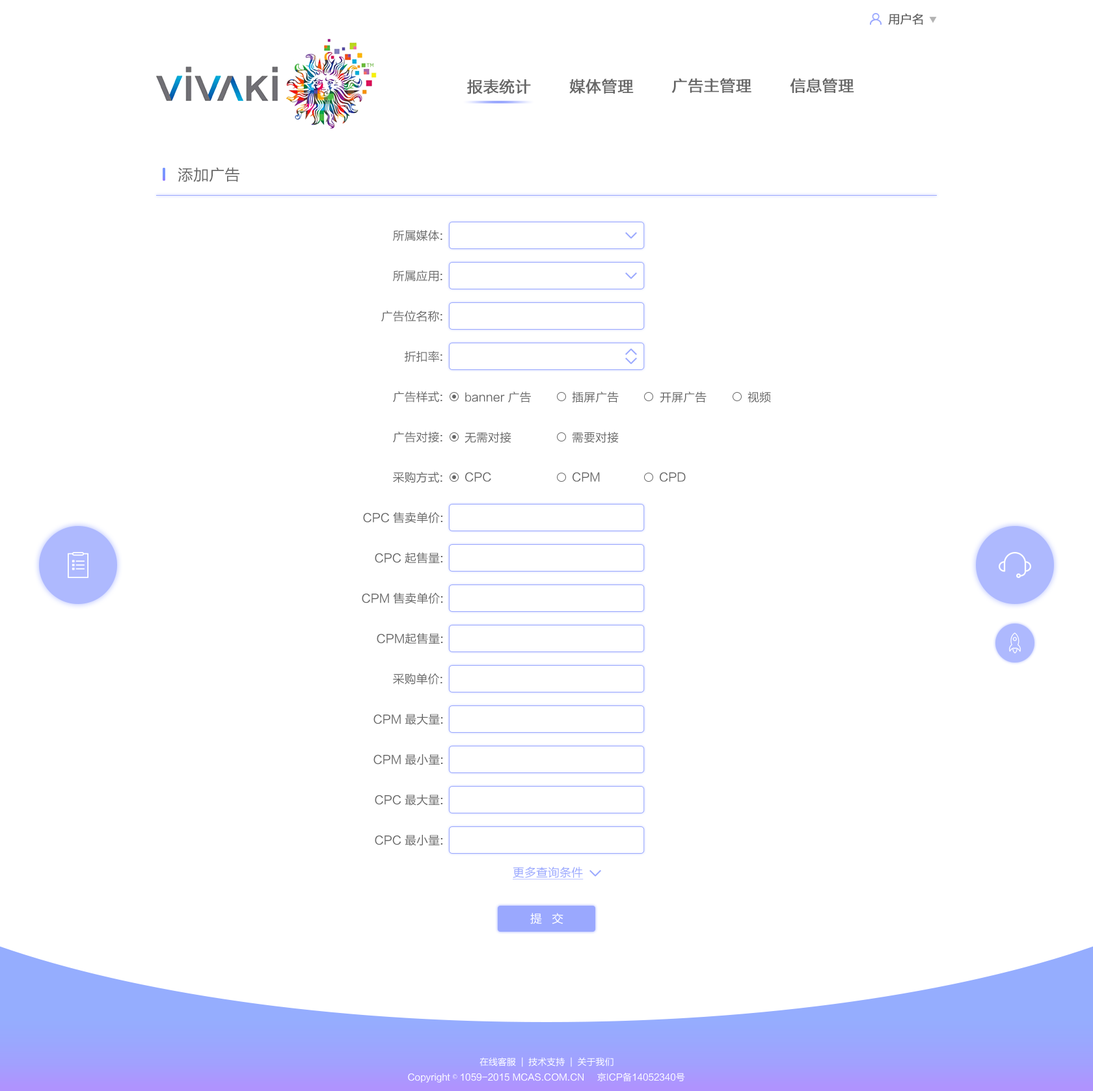
<style>
.page{position:relative;width:1093px;height:1091px;background:#ffffff}
.page>*{position:absolute;margin:0}
.t1{font:11.7px "FZLTHJW--GB1-0";color:#666666;font-weight:bold}
.t2{font:15.6px "FZLTHJW--GB1-0";color:#666666;font-weight:bold}
.t3{font:15.6px "FZLTHJW--GB1-0";color:#666666}
.t4{font:11.7px "FZLTHJW--GB1-0";color:#666666}
.t5{font:11.7px "FZLTHJW--GB1-0";color:#9aa8fe;text-decoration:underline}
.t6{font:11.7px "FZLTHJW--GB1-0";color:#ffffff}
.t7{font:9.1px "FZLTHJW--GB1-0";color:#ffffff}
.t8{font:9.1px "SimSun";color:#ffffff}
</style>
<div class="page">
<p class="t1" style="left:888px;top:13px;width:35px;height:12px">用户名</p>
<p class="t2" style="left:467px;top:79px;width:64px;height:15px">报表统计</p>
<p class="t2" style="left:569px;top:79px;width:64px;height:15px">媒体管理</p>
<p class="t2" style="left:671px;top:78px;width:80px;height:15px">广告主管理</p>
<p class="t2" style="left:790px;top:78px;width:64px;height:15px">信息管理</p>
<p class="t3" style="left:178px;top:167px;width:61px;height:15px">添加广告</p>
<p class="t4" style="left:393px;top:230px;width:49px;height:11px">所属媒体:</p>
<p class="t4" style="left:393px;top:270px;width:49px;height:12px">所属应用:</p>
<p class="t4" style="left:381px;top:310px;width:61px;height:12px">广告位名称:</p>
<p class="t4" style="left:405px;top:351px;width:37px;height:11px">折扣率:</p>
<p class="t4" style="left:393px;top:391px;width:49px;height:12px">广告样式:</p>
<p class="t4" style="left:465px;top:392px;width:66px;height:11px">banner 广告</p>
<p class="t4" style="left:572px;top:392px;width:47px;height:11px">插屏广告</p>
<p class="t4" style="left:659px;top:392px;width:47px;height:11px">开屏广告</p>
<p class="t4" style="left:747px;top:392px;width:24px;height:11px">视频</p>
<p class="t4" style="left:393px;top:431px;width:49px;height:12px">广告对接:</p>
<p class="t4" style="left:464px;top:432px;width:47px;height:11px">无需对接</p>
<p class="t4" style="left:572px;top:432px;width:47px;height:12px">需要对接</p>
<p class="t4" style="left:393px;top:472px;width:49px;height:11px">采购方式:</p>
<p class="t4" style="left:465px;top:472px;width:26px;height:10px">CPC</p>
<p class="t4" style="left:572px;top:472px;width:28px;height:10px">CPM</p>
<p class="t4" style="left:659px;top:472px;width:26px;height:10px">CPD</p>
<p class="t4" style="left:363px;top:512px;width:79px;height:12px">CPC 售卖单价:</p>
<p class="t4" style="left:375px;top:552px;width:67px;height:12px">CPC 起售量:</p>
<p class="t4" style="left:362px;top:592px;width:81px;height:12px">CPM 售卖单价:</p>
<p class="t4" style="left:377px;top:633px;width:66px;height:12px">CPM起售量:</p>
<p class="t4" style="left:393px;top:673px;width:49px;height:12px">采购单价:</p>
<p class="t4" style="left:373px;top:714px;width:70px;height:11px">CPM 最大量:</p>
<p class="t4" style="left:373px;top:754px;width:70px;height:11px">CPM 最小量:</p>
<p class="t4" style="left:375px;top:795px;width:67px;height:11px">CPC 最大量:</p>
<p class="t4" style="left:375px;top:835px;width:67px;height:11px">CPC 最小量:</p>
<p class="t5" style="left:512px;top:867px;width:71px;height:13px">更多查询条件</p>
<p class="t6" style="left:530px;top:913px;width:33px;height:11px">提   交</p>
<p class="t7" style="left:479px;top:1058px;width:134px;height:9px">在线客服  |  技术支持  |  关于我们</p>
<p class="t7" style="left:408px;top:1073px;width:277px;height:10px">Copyright <span class="t8">©</span> 1059-2015 MCAS.COM.CN     京ICP备14052340号</p>
</div>
